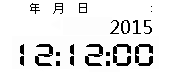
<style>
.page{position:relative;width:172px;height:72px;background:#ffffff}
.page>*{position:absolute;margin:0}
.t1{font:18px "MicrosoftYaHei";color:#000000}
.t2{font:30px "DigifaceWide";color:#000000}
</style>
<div class="page">
<p class="t1" style="left:110px;top:20px;width:42px;height:14px">2015</p>
<p class="t2" style="left:20px;top:44px;width:133px;height:22px">12:12:00</p>
</div>
